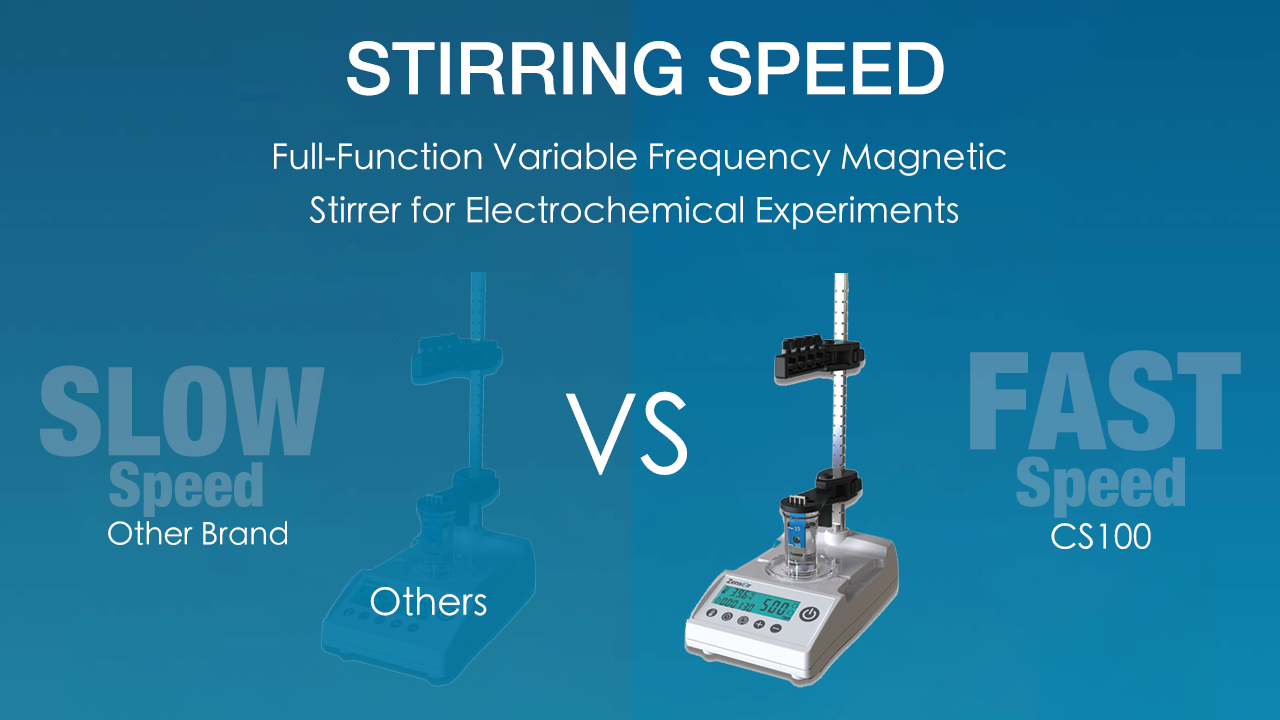
<style>
.page{position:relative;width:1280px;height:720px}
.page>*{position:absolute;margin:0}
.t1{font:72.8px "HelveticaNeue-Medium";color:#ffffff}
.t2{font:35.6px "STHeitiTC-Light";color:#ffffff}
.t3{font:135.5px "HelveticaNeue-CondensedBlack";color:#4d8eaf}
.t4{font:123.1px "HelveticaNeue-CondensedBlack";color:#538ba6}
.t5{font:109.8px "STHeitiTC-Light";color:#ffffff}
.t6{font:61.8px "HelveticaNeue-CondensedBlack";color:#548ea8}
.t7{font:68px "HelveticaNeue-CondensedBlack";color:#4e91b2}
.t8{font:31.1px "STHeitiTC-Light";color:#ffffff}
.t9{font:34.3px "STHeitiTC-Light";color:#ffffff}
.t10{font:37.7px "STHeitiTC-Light";color:#ffffff}
</style>
<div class="page">
<p class="t1" style="left:347px;top:41px;width:597px;height:55px">STIRRING SPEED</p>
<p class="t2" style="left:274px;top:142px;width:732px;height:34px">Full-Function Variable Frequency Magnetic</p>
<p class="t2" style="left:309px;top:196px;width:649px;height:34px">Stirrer for Electrochemical Experiments</p>
<p class="t3" style="left:970px;top:350px;width:271px;height:101px">FAST</p>
<p class="t4" style="left:40px;top:365px;width:285px;height:92px">SLOW</p>
<p class="t5" style="left:565px;top:391px;width:122px;height:84px">VS</p>
<p class="t6" style="left:109px;top:461px;width:154px;height:56px">Speed</p>
<p class="t7" style="left:1016px;top:456px;width:169px;height:62px">Speed</p>
<p class="t8" style="left:108px;top:521px;width:179px;height:24px">Other Brand</p>
<p class="t9" style="left:1051px;top:523px;width:100px;height:26px">CS100</p>
<p class="t10" style="left:370px;top:587px;width:117px;height:29px">Others</p>
</div>
